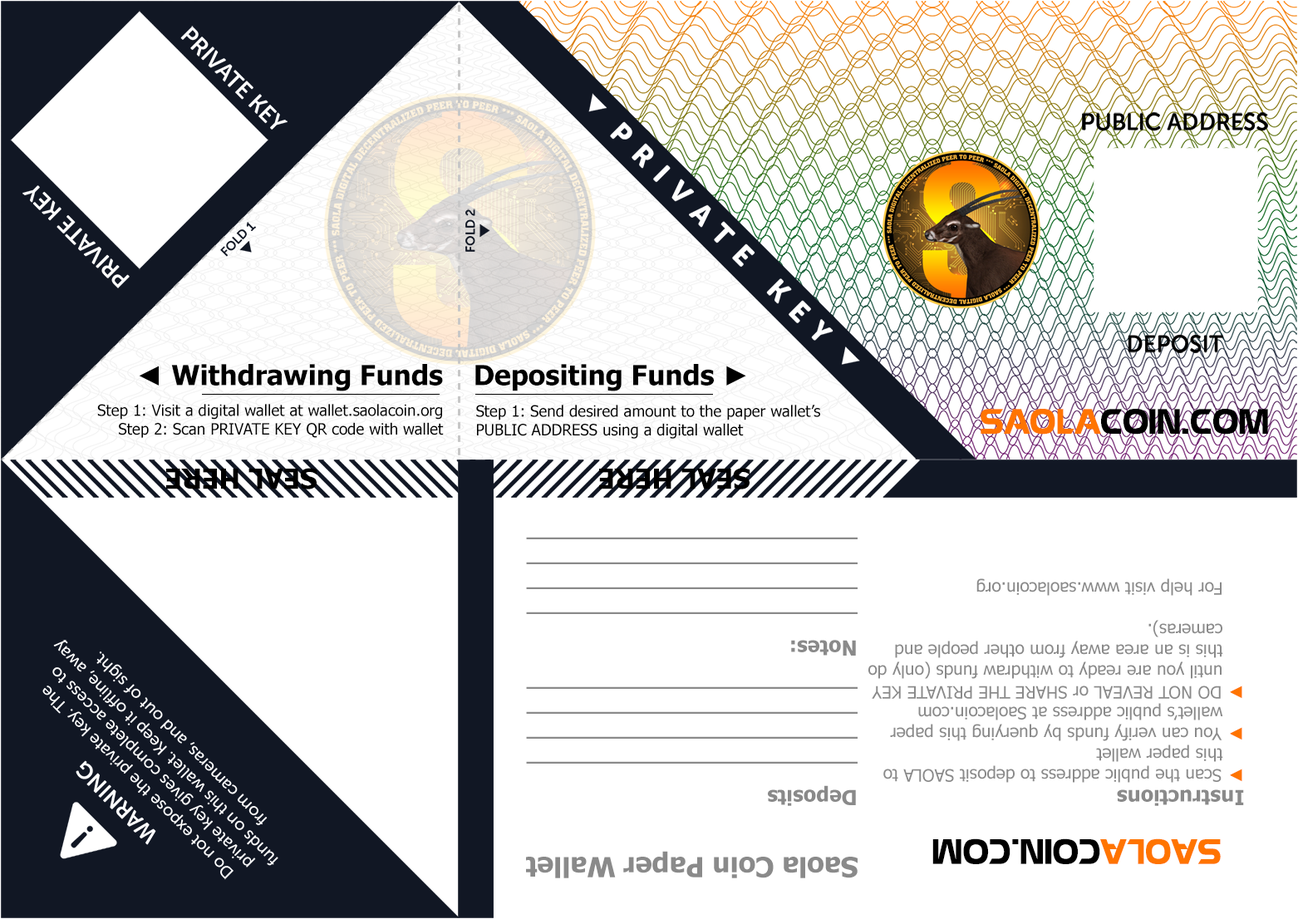
<style>
.page{position:relative;width:1298px;height:919px;background:#ffffff}
.page>*{position:absolute;margin:0}
.t1{font:27.7px "Tahoma-Bold";color:#000000}
.t2{font:27.7px "Tahoma";color:#000000}
.t3{font:15.6px "Tahoma";color:#000000}
.t4{font:34.6px "UTM-Eremitage";color:#000000}
.t5{font:34.6px "UTM-Eremitage";color:#ff7400}
.t6{font:20.8px "Tahoma-Bold";color:#8a8a8a}
.t7{font:17.3px "Tahoma";color:#8a8a8a}
.t8{font:17.3px "Tahoma";color:#ff7400}
.t9{font:17.3px "Tahoma-Bold";color:#ff7400}
.t10{font:27.7px "Tahoma-Bold";color:#8a8a8a}
</style>
<div class="page">
<p class="t1" style="left:139px;top:364px;width:304px;height:27px"><span class="t2">◄ </span>Withdrawing Funds</p>
<p class="t1" style="left:475px;top:364px;width:271px;height:27px">Depositing Funds ►</p>
<p class="t3" style="left:97px;top:404px;width:347px;height:34px;text-align:right">Step 1: Visit a digital wallet at wallet.saolacoin.org<br>Step 2: Scan PRIVATE KEY QR code with wallet</p>
<p class="t3" style="left:476px;top:405px;width:344px;height:34px">Step 1: Send desired amount to the paper wallet’s<br>PUBLIC ADDRESS using a digital wallet</p>
<p class="t4" style="left:980px;top:409px;width:288px;height:26px"><span class="t5">SAOLA</span>COIN.COM</p>
<p class="t1" style="left:166px;top:468px;width:151px;height:21px;rotate:180deg">SEAL HERE</p>
<p class="t1" style="left:599px;top:468px;width:151px;height:21px;rotate:180deg">SEAL HERE</p>
<p class="t6" style="left:526px;top:537px;width:331px;height:269px;rotate:180deg">Deposits<br>_________________________<br>_________________________<br>_________________________<br>_________________________<br><br>Notes:<br>_________________________<br>_________________________<br>_________________________<br>_________________________</p>
<p class="t7" style="left:868px;top:578px;width:376px;height:228px;rotate:180deg"><span class="t6">Instructions<br></span><span class="t8">►</span> Scan the public address to deposit SAOLA to <br>    this paper wallet<br><span class="t9">►</span> You can verify funds by querying this paper<br>    wallet’s public address at Saolacoin.com<br><span class="t9">►</span> DO NOT REVEAL or SHARE THE PRIVATE KEY<br>    until you are ready to withdraw funds (only do<br>    this is an area away from other people and<br>    cameras).<br><br>    For help visit www.saolacoin.org</p>
<p class="t4" style="left:932px;top:838px;width:288px;height:26px;rotate:180deg"><span class="t5">SAOLA</span>COIN.COM</p>
<p class="t10" style="left:526px;top:851px;width:331px;height:27px;rotate:180deg">Saola Coin Paper Wallet</p>
</div>
